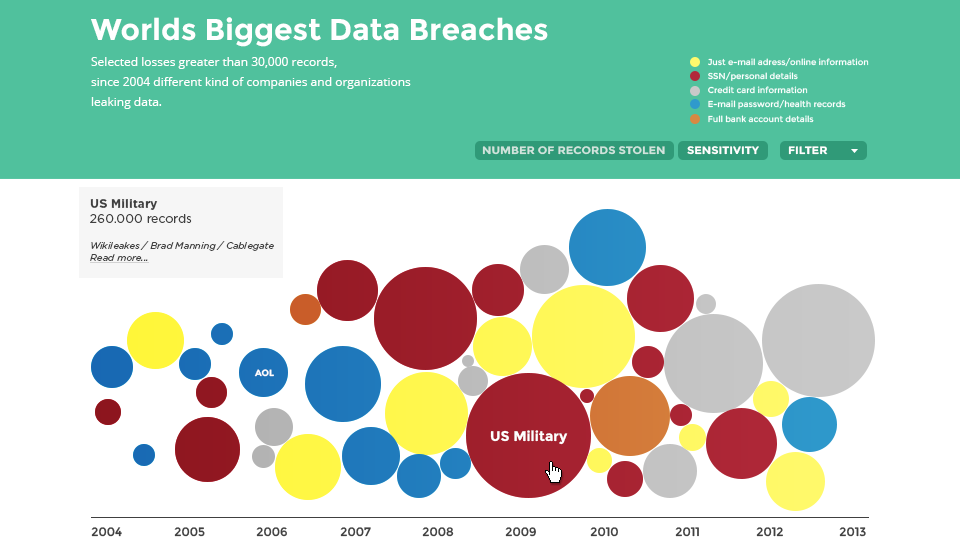
<style>
.page{position:relative;width:960px;height:555px;background:#ffffff}
.page>*{position:absolute;margin:0}
.t1{font:30px "Montserrat-Bold";color:#ffffff}
.t2{font:12px/20px "OpenSans";color:#ffffff}
.t3{font:8.4px "Montserrat-Regular";color:#ffffff}
.t4{font:10.9px "Montserrat-Bold";color:#d0e4dc;scale:1.06 1}
.t5{font:10.9px "Montserrat-Bold";color:#ffffff;scale:1.06 1}
.t6{font:9.5px "GothamHTF-BookItalic";color:#404040}
.t7{font:12.2px "GothamHTF-Bold";color:#404040}
.t8{font:12.2px "GothamHTF-Book";color:#404040}
.t9{font:9.5px "GothamHTF-BookItalic";color:#404040;text-decoration:underline}
.t10{font:9px "Montserrat-Bold";color:#ffffff}
.t11{font:14px "Montserrat-Bold";color:#ffffff}
.t12{font:12px "Montserrat-Regular";color:#404040}
</style>
<div class="page">
<p class="t1" style="left:91px;top:17px;width:457px;height:30px">Worlds Biggest Data Breaches</p>
<p class="t2" style="left:91px;top:57px;width:320px;height:52px">Selected losses greater than 30,000 records, <br>since 2004 different kind of companies and organizations<br>leaking data.</p>
<p class="t3" style="left:708px;top:57px;width:161px;height:10px">Just e-mail adress/online information</p>
<p class="t3" style="left:708px;top:71px;width:90px;height:10px">SSN/personal details</p>
<p class="t3" style="left:708px;top:86px;width:100px;height:8px">Credit card information</p>
<p class="t3" style="left:708px;top:99px;width:138px;height:10px">E-mail password/health records</p>
<p class="t3" style="left:708px;top:115px;width:106px;height:8px">Full bank account details</p>
<p class="t4" style="left:482px;top:146px;width:183px;height:9px">NUMBER OF RECORDS STOLEN</p>
<p class="t5" style="left:687px;top:146px;width:72px;height:9px">SENSITIVITY</p>
<p class="t5" style="left:788px;top:146px;width:40px;height:9px">FILTER</p>
<p class="t6" style="left:90px;top:199px;width:184px;height:64px"><span class="t7">US Military<br></span><span class="t8">260.000 records<br><br></span>Wikileakes / Brad Manning / Cablegate<br><span class="t9">Read more...</span></p>
<p class="t10" style="left:254px;top:369px;width:20px;height:8px">AOL</p>
<p class="t11" style="left:490px;top:430px;width:78px;height:15px">US Military</p>
<p class="t12" style="left:91px;top:527px;width:31px;height:10px">2004</p>
<p class="t12" style="left:174px;top:527px;width:31px;height:10px">2005</p>
<p class="t12" style="left:256px;top:527px;width:31px;height:10px">2006</p>
<p class="t12" style="left:340px;top:527px;width:31px;height:10px">2007</p>
<p class="t12" style="left:422px;top:527px;width:32px;height:10px">2008</p>
<p class="t12" style="left:505px;top:527px;width:31px;height:10px">2009</p>
<p class="t12" style="left:590px;top:527px;width:28px;height:10px">2010</p>
<p class="t12" style="left:675px;top:527px;width:24px;height:10px">2011</p>
<p class="t12" style="left:756px;top:527px;width:27px;height:10px">2012</p>
<p class="t12" style="left:839px;top:527px;width:27px;height:10px">2013</p>
</div>
